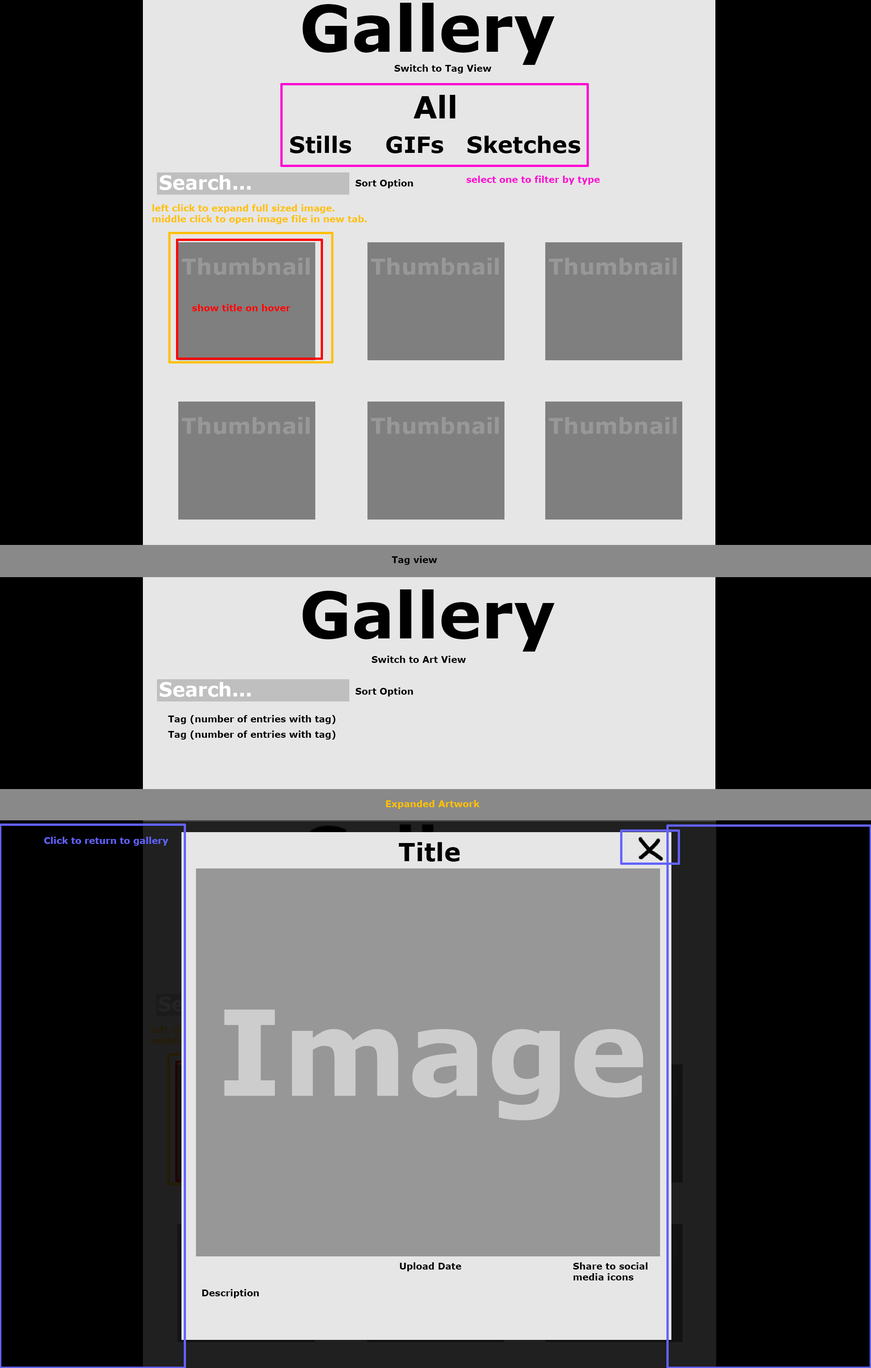
<style>
.page{position:relative;width:871px;height:1368px;background:#000000}
.page>*{position:absolute;margin:0}
.t1{font:64.4px "Verdana-Bold";color:#000000}
.t2{font:9.1px "Verdana-Bold";color:#000000}
.t3{font:30.7px "Verdana-Bold";color:#000000}
.t4{font:22.6px "Verdana-Bold";color:#000000}
.t5{font:19px "Verdana-Bold";color:#ffffff}
.t6{font:9.1px "Verdana-Bold";color:#ff00d2}
.t7{font:9.1px "Verdana-Bold";color:#ffc000}
.t8{font:9.1px "Verdana-Bold";color:#ff0000}
.t9{font:9.1px "Verdana-Bold";color:#6262ff}
.t10{font:25.1px "Verdana-Bold";color:#000000}
.t11{font:118.6px "Verdana-Bold";color:#cdcdcd}
</style>
<div class="page">
<p class="t1" style="left:303px;top:3px;width:252px;height:62px">Gallery</p>
<p class="t2" style="left:394px;top:64px;width:98px;height:10px">Switch to Tag View</p>
<p class="t3" style="left:413px;top:95px;width:43px;height:23px">All</p>
<p class="t4" style="left:290px;top:136px;width:61px;height:17px">Stills</p>
<p class="t4" style="left:386px;top:136px;width:57px;height:17px">GIFs</p>
<p class="t4" style="left:467px;top:136px;width:113px;height:17px">Sketches</p>
<p class="t5" style="left:160px;top:175px;width:91px;height:15px">Search...</p>
<p class="t2" style="left:356px;top:179px;width:57px;height:9px">Sort Option</p>
<p class="t6" style="left:467px;top:176px;width:133px;height:9px">select one to filter by type</p>
<p class="t7" style="left:152px;top:204px;width:215px;height:20px">left click to expand full sized image.<br>middle click to open image file in new tab.</p>
<p class="t8" style="left:192px;top:304px;width:98px;height:7px">show title on hover</p>
<p class="t2" style="left:392px;top:556px;width:46px;height:9px">Tag view</p>
<p class="t1" style="left:303px;top:590px;width:252px;height:62px">Gallery</p>
<p class="t2" style="left:372px;top:656px;width:94px;height:7px">Switch to Art View</p>
<p class="t5" style="left:160px;top:682px;width:91px;height:15px">Search...</p>
<p class="t2" style="left:356px;top:688px;width:57px;height:9px">Sort Option</p>
<p class="t2" style="left:168px;top:715px;width:168px;height:9px">Tag (number of entries with tag)</p>
<p class="t2" style="left:168px;top:731px;width:168px;height:9px">Tag (number of entries with tag)</p>
<p class="t7" style="left:386px;top:800px;width:94px;height:9px">Expanded Artwork</p>
<p class="t9" style="left:44px;top:837px;width:124px;height:9px">Click to return to gallery</p>
<p class="t10" style="left:399px;top:842px;width:61px;height:20px">Title</p>
<p class="t11" style="left:224px;top:1010px;width:420px;height:111px">Image</p>
<p class="t2" style="left:400px;top:1263px;width:62px;height:9px">Upload Date</p>
<p class="t2" style="left:573px;top:1263px;width:75px;height:18px">Share to social<br>media icons</p>
<p class="t2" style="left:202px;top:1289px;width:57px;height:9px">Description</p>
</div>
